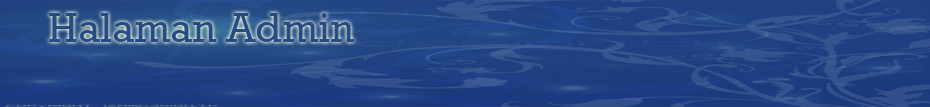
<style>
.page{position:relative;width:930px;height:107px}
.page>*{position:absolute;margin:0}
.t1{font:41.7px "Rockwell";color:#254c85}
</style>
<div class="page">
<p class="t1" style="left:49px;top:13px;width:305px;height:29px">Halaman Admin</p>
</div>
